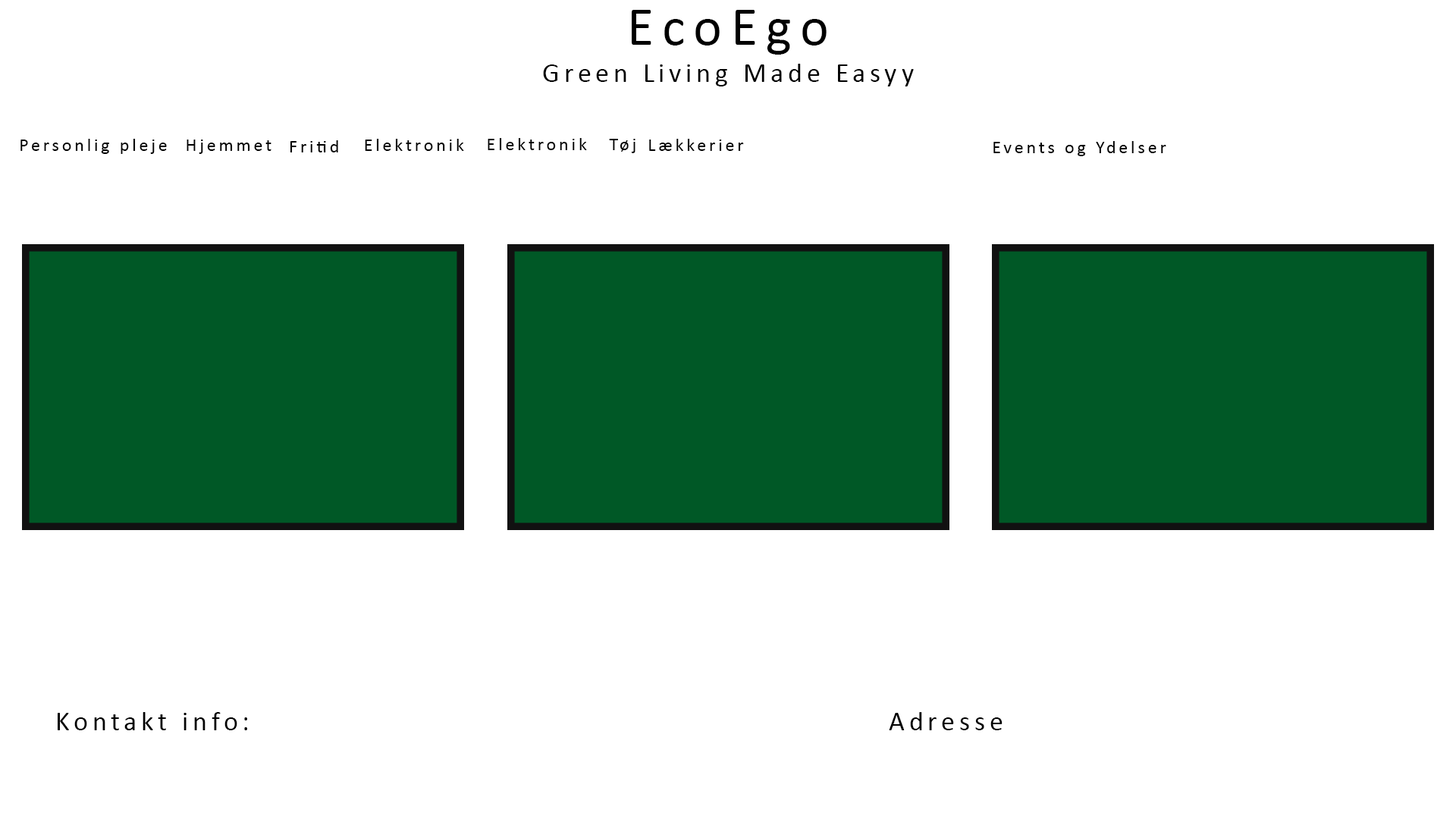
<style>
.page{position:relative;width:1456px;height:819px;background:#ffffff}
.page>*{position:absolute;margin:0}
.t1{font:54.6px "Calibri";letter-spacing:0.16em;color:#000000}
.t2{font:27.3px "Calibri";letter-spacing:0.16em;color:#000000}
.t3{font:18.2px "Calibri";letter-spacing:0.16em;color:#000000}
</style>
<div class="page">
<p class="t1" style="left:632px;top:10px;width:195px;height:45px">EcoEgo</p>
<p class="t2" style="left:543px;top:64px;width:371px;height:22px">Green Living Made Easyy</p>
<p class="t3" style="left:20px;top:139px;width:147px;height:15px">Personlig pleje</p>
<p class="t3" style="left:187px;top:140px;width:84px;height:14px">Hjemmet</p>
<p class="t3" style="left:290px;top:140px;width:48px;height:12px">Fritid</p>
<p class="t3" style="left:365px;top:139px;width:99px;height:12px">Elektronik</p>
<p class="t3" style="left:488px;top:138px;width:99px;height:12px">Elektronik</p>
<p class="t3" style="left:609px;top:139px;width:26px;height:14px">Tøj</p>
<p class="t3" style="left:649px;top:139px;width:95px;height:12px">Lækkerier</p>
<p class="t3" style="left:993px;top:141px;width:173px;height:15px">Events og Ydelser</p>
<p class="t2" style="left:58px;top:712px;width:189px;height:18px">Kontakt info:</p>
<p class="t2" style="left:889px;top:712px;width:114px;height:18px">Adresse</p>
</div>
